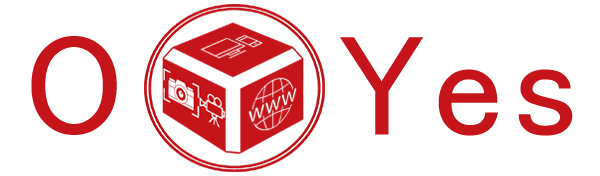
<style>
.page{position:relative;width:600px;height:176px;background:#ffffff}
.page>*{position:absolute;margin:0}
.t1{font:145.1px "MS-PGothic";letter-spacing:0.05em;color:#c5151b}
</style>
<div class="page">
<p class="t1" style="left:31px;top:36px;width:542px;height:100px">O    Yes</p>
</div>
